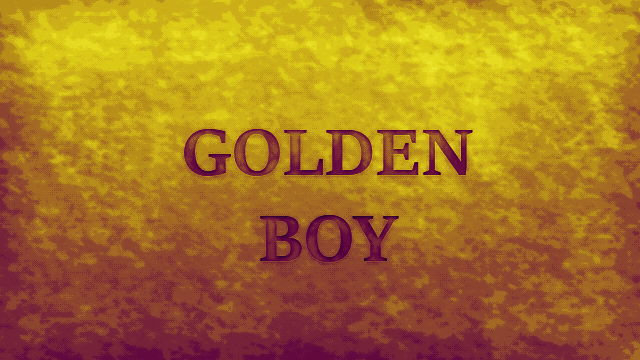
<style>
.page{position:relative;width:640px;height:360px}
.page>*{position:absolute;margin:0}
.t1{font:72px "SitkaSubheading-Bold"}
</style>
<div class="page">
<p class="t1" style="left:184px;top:129px;width:289px;height:133px;text-align:center">GOLDEN<br>BOY</p>
</div>
